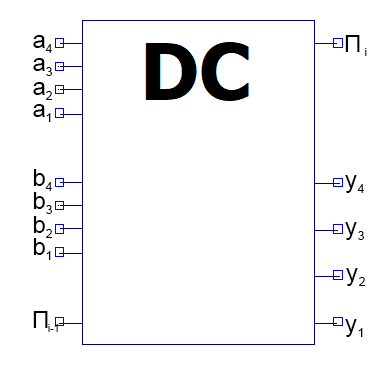
<style>
.page{position:relative;width:387px;height:375px;background:#ffffff}
.page>*{position:absolute;margin:0}
.t1{font:24px "ArialMT";color:#000000}
.t2{font:12px "ArialMT";color:#000000}
.t3{font:10.7px "ArialMT"}
.t4{font:10.7px "ArialMT";color:#000000}
</style>
<div class="page">
<p class="t1" style="left:33px;top:35px;width:12px;height:13px">a</p>
<p class="t1" style="left:345px;top:35px;width:15px;height:17px">П</p>
<p class="t2" style="left:45px;top:44px;width:7px;height:9px">4</p>
<p class="t3" style="left:365px;top:48px;width:2px;height:8px">i</p>
<p class="t1" style="left:33px;top:58px;width:12px;height:13px">a</p>
<p class="t2" style="left:46px;top:67px;width:6px;height:9px">3</p>
<p class="t1" style="left:33px;top:82px;width:12px;height:13px">a</p>
<p class="t2" style="left:46px;top:91px;width:6px;height:9px">2</p>
<p class="t1" style="left:33px;top:104px;width:12px;height:13px">a</p>
<p class="t2" style="left:46px;top:113px;width:5px;height:9px">1</p>
<p class="t1" style="left:33px;top:169px;width:12px;height:17px">b</p>
<p class="t2" style="left:45px;top:182px;width:7px;height:9px">4</p>
<p class="t1" style="left:345px;top:175px;width:12px;height:18px">y</p>
<p class="t2" style="left:357px;top:184px;width:7px;height:9px">4</p>
<p class="t1" style="left:33px;top:192px;width:12px;height:17px">b</p>
<p class="t2" style="left:46px;top:205px;width:6px;height:9px">3</p>
<p class="t1" style="left:33px;top:216px;width:12px;height:17px">b</p>
<p class="t1" style="left:345px;top:222px;width:12px;height:18px">y</p>
<p class="t2" style="left:46px;top:229px;width:6px;height:9px">2</p>
<p class="t2" style="left:358px;top:231px;width:6px;height:9px">3</p>
<p class="t1" style="left:33px;top:238px;width:12px;height:17px">b</p>
<p class="t2" style="left:46px;top:251px;width:5px;height:9px">1</p>
<p class="t1" style="left:346px;top:268px;width:12px;height:18px">y</p>
<p class="t2" style="left:359px;top:277px;width:6px;height:9px">2</p>
<p class="t1" style="left:33px;top:311px;width:15px;height:17px">П</p>
<p class="t4" style="left:48px;top:324px;width:10px;height:8px">i-1</p>
<p class="t1" style="left:345px;top:319px;width:12px;height:18px">y</p>
<p class="t2" style="left:358px;top:328px;width:5px;height:9px">1</p>
</div>
